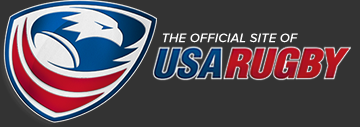
<style>
.page{position:relative;width:360px;height:127px;background:#333333}
.page>*{position:absolute;margin:0}
.t1{font:13px "ProximaNova-SemiboldIt";letter-spacing:0.01em;color:#ffffff;text-transform:uppercase}
</style>
<div class="page">
<p class="t1" style="left:162px;top:33px;width:136px;height:10px">The official site of</p>
</div>
